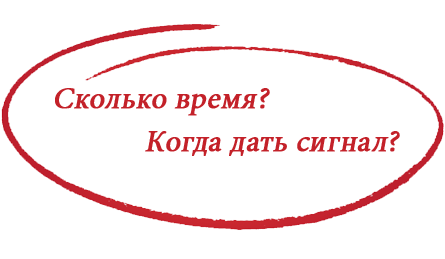
<style>
.page{position:relative;width:445px;height:259px;background:#ffffff}
.page>*{position:absolute;margin:0}
.t1{font:30px/43.4px "MinionPro-Regular";color:#c32129;font-weight:bold;font-style:italic}
</style>
<div class="page">
<p class="t1" style="left:55px;top:88px;width:345px;height:68px;text-align:center">Сколько время?<br>                             Когда дать сигнал?</p>
</div>
